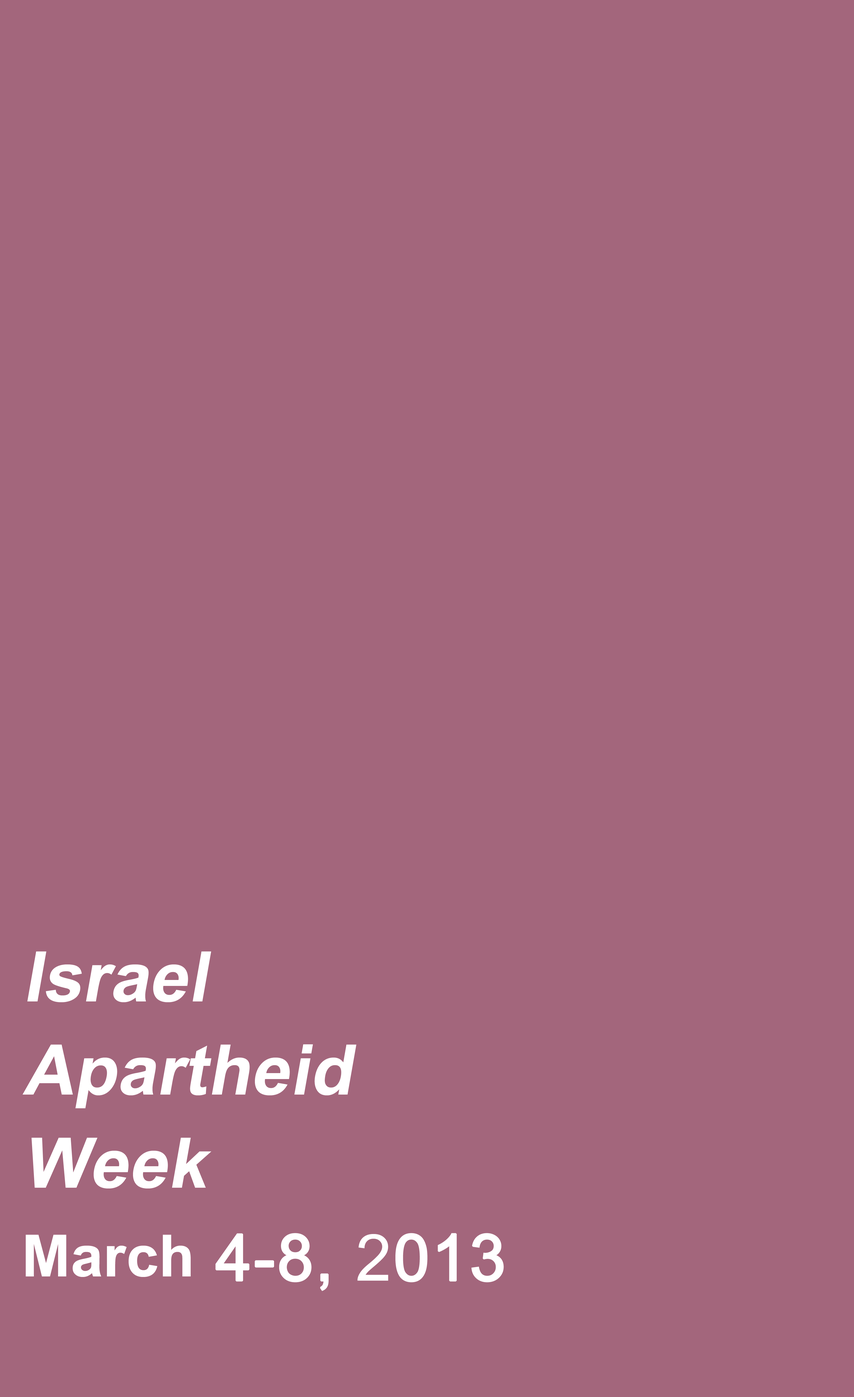
<style>
.page{position:relative;width:854px;height:1397px;background:#a3667c}
.page>*{position:absolute;margin:0}
.t1{font:77.6px "ArabicTransparent-Bold";letter-spacing:0.005em;color:#ffffff;font-style:italic}
.t2{font:64.7px "ArialMT";letter-spacing:0.005em;color:#ffffff;font-weight:bold}
.t3{font:64.7px "ArabicTransparent-Bold";letter-spacing:0.005em;color:#ffffff}
</style>
<div class="page">
<p class="t1" style="left:23px;top:951px;width:333px;height:237px">Israel<br>Apartheid<br>Week</p>
<p class="t2" style="left:26px;top:1233px;width:478px;height:58px"><span class="t3">March </span>4-8, 2013</p>
</div>
